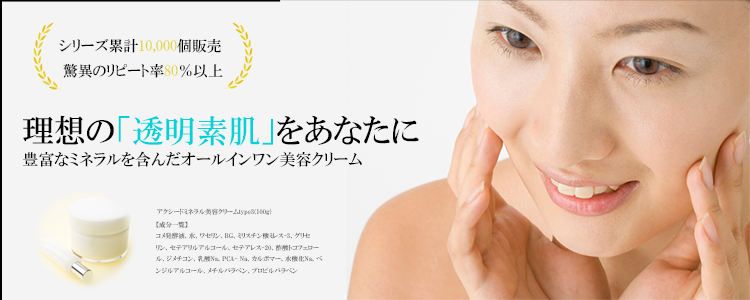
<style>
.page{position:relative;width:750px;height:300px;background:#f4f4f4}
.page>*{position:absolute;margin:0}
.t1{font:14.9px "HGPMinchoB";color:#000000}
.t2{font:14.9px "HGPMinchoB";color:#e5d541}
.t3{font:32px "HGPMinchoB";color:#00d2da}
.t4{font:32px "HGPMinchoB";color:#000000}
.t5{font:16px "HGPMinchoB";color:#000000}
.t6{font:6.5px "HGPMinchoE"}
.t7{font:6.5px "HGPMinchoE";color:#585858}
</style>
<div class="page">
<p class="t1" style="left:59px;top:38px;width:162px;height:15px">シリーズ累計<span class="t2">10,000</span>個販売</p>
<p class="t1" style="left:63px;top:63px;width:160px;height:15px">驚異のリピート率<span class="t2">80</span>％以上</p>
<p class="t3" style="left:23px;top:115px;width:396px;height:31px"><span class="t4">理想の</span>「透明素肌」<span class="t4">をあなたに</span></p>
<p class="t5" style="left:23px;top:151px;width:339px;height:16px">豊富なミネラルを含んだオールインワン美容クリーム</p>
<p class="t6" style="left:157px;top:208px;width:115px;height:7px">アクシードミネラル美容クリームtype3(100g)</p>
<p class="t7" style="left:156px;top:221px;width:32px;height:7px">【成分一覧】</p>
<p class="t7" style="left:156px;top:232px;width:167px;height:42px">コメ発酵液、水、ワセリン、BG、ミリスチン酸ミレス-3、グリセ<br>リン、セテアリルアルコール、セテアレス-20、酢酸トコフェロー<br>ル、ジメチコン、乳酸Na、PCA- Na、カルボマー、水酸化Na、ベ<br>ンジルアルコール、メチルパラベン、プロピルパラベン</p>
</div>
